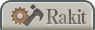
<style>
.page{position:relative;width:95px;height:30px;background:#c5c2b9}
.page>*{position:absolute;margin:0}
.t1{font:20px "RyuminPro-ExBold";letter-spacing:-0.08em;color:#6e6b64;scale:0.9 1}
</style>
<div class="page">
<p class="t1" style="left:46px;top:9px;width:41px;height:15px">Rakit</p>
</div>
